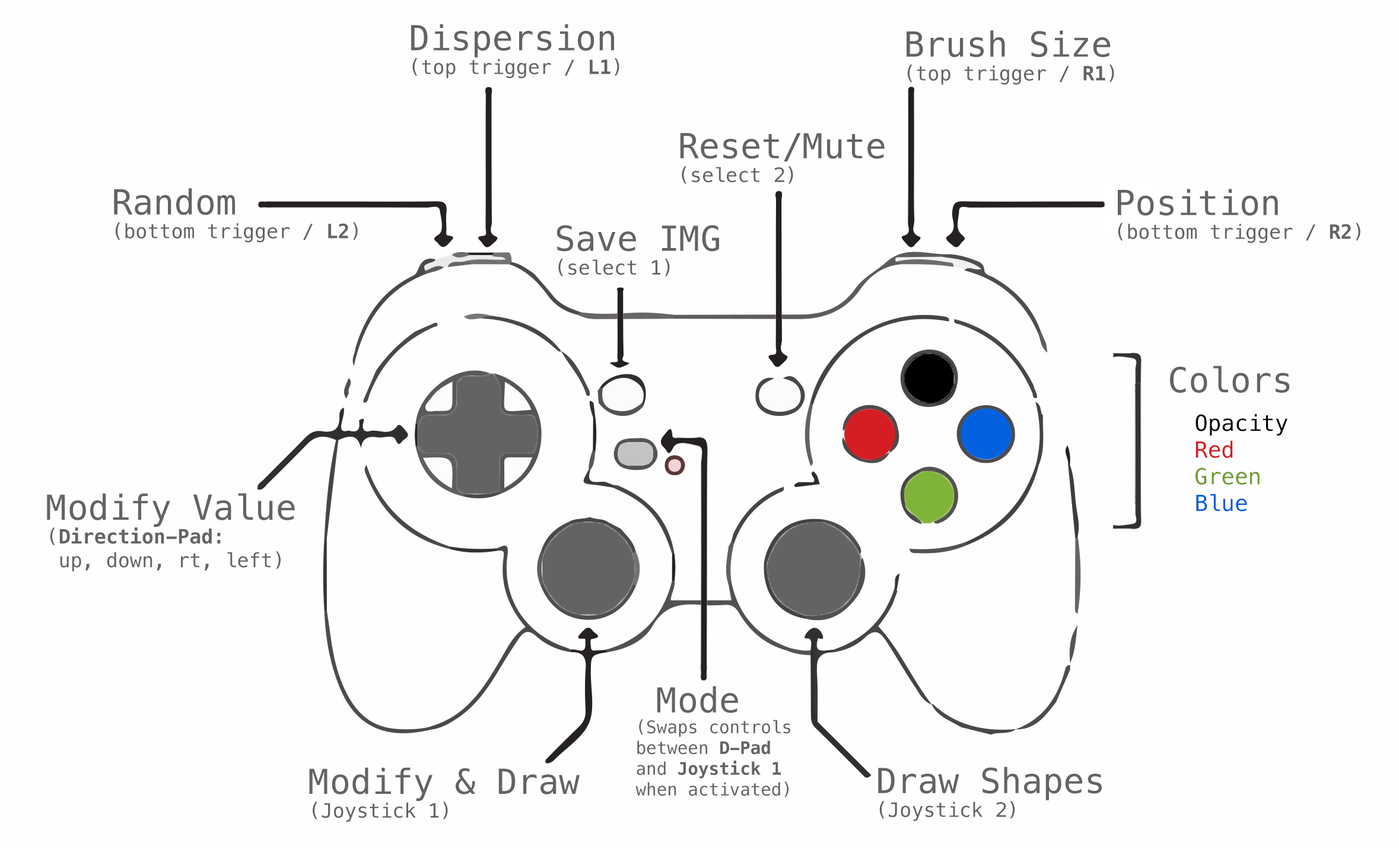
<style>
.page{position:relative;width:1399px;height:852px;background:#fefefe}
.page>*{position:absolute;margin:0}
.t1{font:19.8px "Menlo-Regular";color:#636363}
.t2{font:34.6px "Menlo-Regular";color:#636363}
.t3{font:19.8px "Menlo-Bold";color:#636363}
.t4{font:22.3px "Menlo-Regular";color:#000000}
.t5{font:22.3px "Menlo-Regular";color:#d51a21}
.t6{font:22.3px "Menlo-Regular";color:#6e9b31}
.t7{font:22.3px "Menlo-Regular";color:#005fe0}
.t8{font:17.3px "Menlo-Regular";color:#636363}
.t9{font:17.3px "Menlo-Bold";color:#636363}
</style>
<div class="page">
<p class="t1" style="left:411px;top:24px;width:209px;height:54px"><span class="t2">Dispersion<br></span>(top trigger / <span class="t3">L1</span>)</p>
<p class="t1" style="left:907px;top:30px;width:207px;height:55px"><span class="t2">Brush Size<br></span>(top trigger / <span class="t3">R1</span>)</p>
<p class="t2" style="left:680px;top:133px;width:205px;height:51px">Reset/Mute<br><span class="t1">(select 2)</span></p>
<p class="t1" style="left:114px;top:188px;width:244px;height:55px"><span class="t2">Random<br></span>(bottom trigger / <span class="t3">L2</span>)</p>
<p class="t1" style="left:1118px;top:189px;width:243px;height:54px"><span class="t2">Position<br></span>(bottom trigger / <span class="t3">R2</span>)</p>
<p class="t1" style="left:557px;top:225px;width:162px;height:52px"><span class="t2">Save IMG<br></span>(select 1)</p>
<p class="t4" style="left:1170px;top:366px;width:120px;height:146px"><span class="t2">Colors<br><br>  </span>Opacity<br><span class="t5">  Red<br></span><span class="t6">  Green<br>  </span><span class="t7">Blue</span></p>
<p class="t1" style="left:47px;top:493px;width:248px;height:78px"><span class="t2">Modify Value<br></span>(<span class="t3">Direction-Pad</span>:<br> up, down, rt, left)</p>
<p class="t8" style="left:636px;top:686px;width:154px;height:112px"><span class="t2"> Mode<br></span>(Swaps controls<br>between <span class="t9">D-Pad</span> <br>and <span class="t9">Joystick 1<br></span>when activated)</p>
<p class="t2" style="left:309px;top:767px;width:271px;height:55px">Modify &amp; Draw<br><span class="t1">(Joystick 1)</span></p>
<p class="t1" style="left:878px;top:767px;width:224px;height:54px"><span class="t2">Draw Shapes<br></span>(Joystick 2)</p>
</div>
